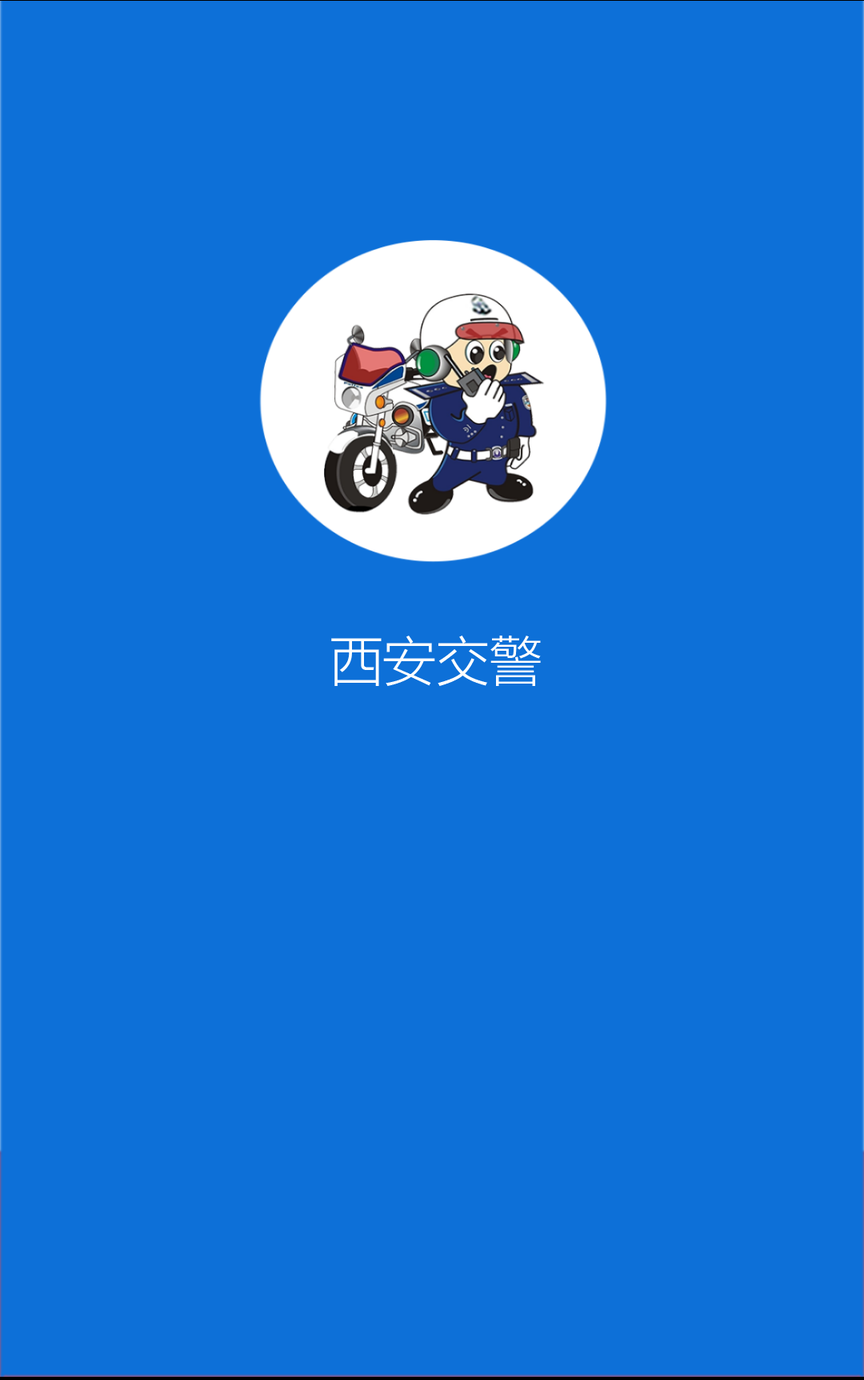
<style>
.page{position:relative;width:864px;height:1380px;background:#0d70d8}
.page>*{position:absolute;margin:0}
.t1{font:53.3px "MicrosoftYaHeiLight";color:#fffefe}
</style>
<div class="page">
<p class="t1" style="left:331px;top:635px;width:210px;height:51px">西安交警</p>
</div>
